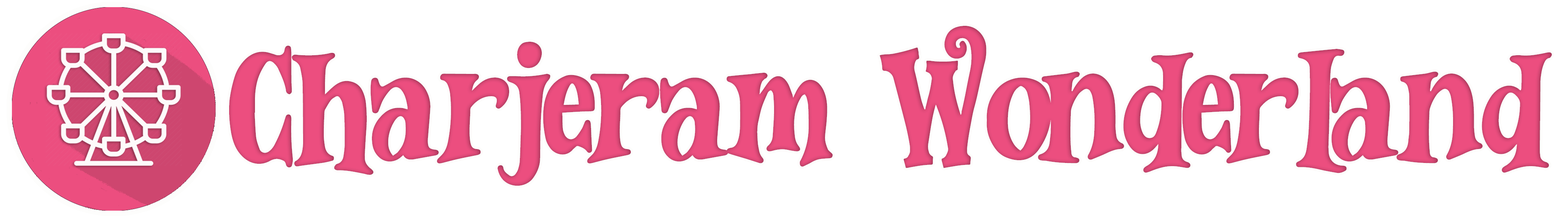
<style>
.page{position:relative;width:1568px;height:219px;background:#ffffff}
.page>*{position:absolute;margin:0}
.t1{font:167.1px "WonderMagicFreeTrial";color:#ec4e7f}
.t2{font:167.1px "HorrorWorld-Regular";color:#ec4e7f}
</style>
<div class="page">
<p class="t1" style="left:229px;top:26px;width:1323px;height:160px">Charjeram <span class="t2">W</span>onderland</p>
</div>
